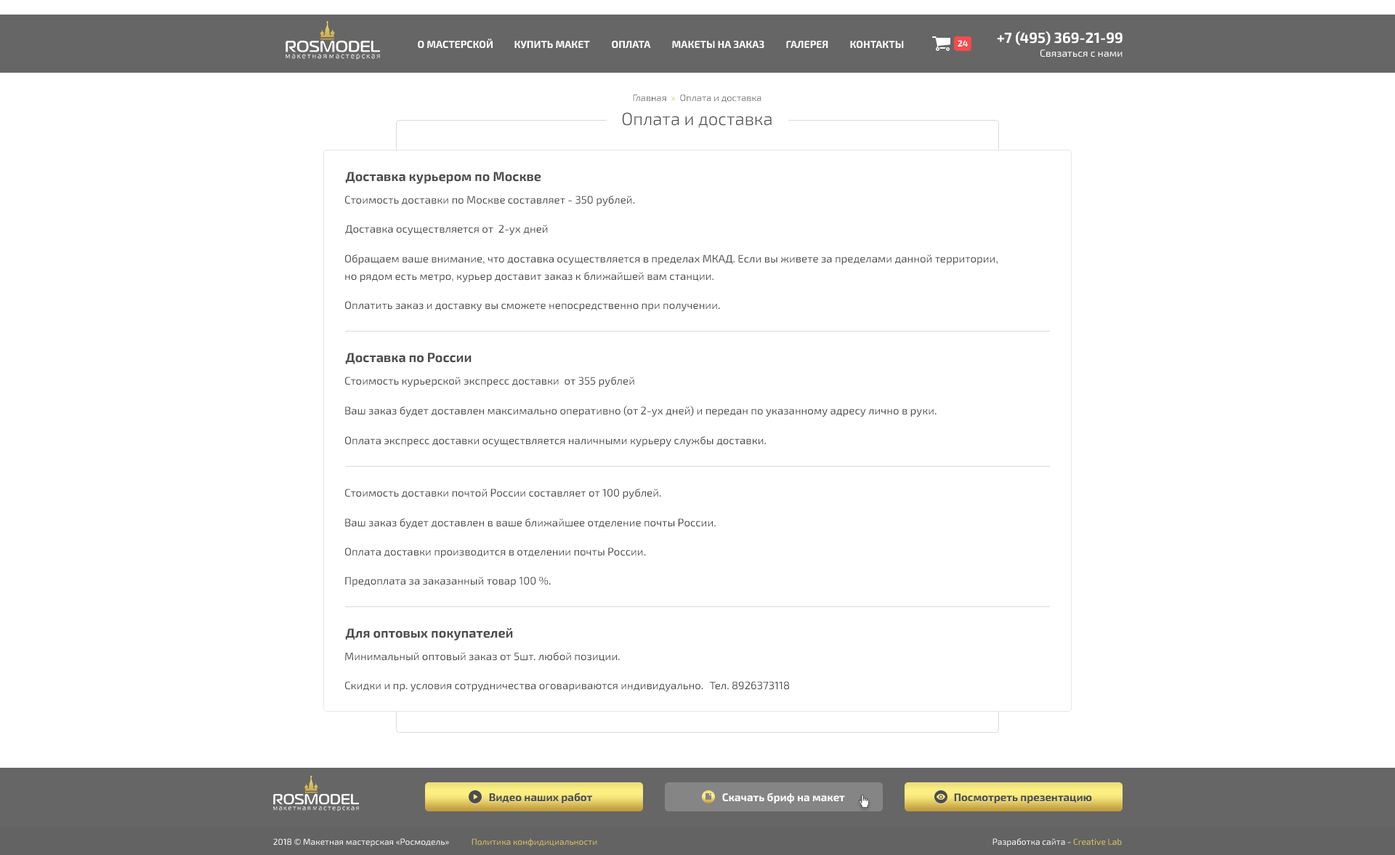
<style>
.page{position:relative;width:1395px;height:855px;background:#ffffff}
.page>*{position:absolute;margin:0}
.t1{font:9.4px "Exo2-Light";color:#4d4d4d}
.t2{font:9.4px "Exo2-Light";color:#d1b558}
.t3{font:17.4px "Exo2-Light";color:#4d4d4d}
.t4{font:13.1px "Exo2-Bold";color:#4d4d4d}
.t5{font:10.9px "Exo2-Regular";color:#4d4d4d}
.t6{font:10.9px/17.4px "Exo2-Regular";color:#4d4d4d}
</style>
<div class="page">
<p class="t1" style="left:633px;top:94px;width:129px;height:8px">Главная  <span class="t2">»</span>  Оплата и доставка</p>
<p class="t3" style="left:622px;top:113px;width:150px;height:15px">Оплата и доставка</p>
<p class="t4" style="left:345px;top:172px;width:196px;height:12px">Доставка курьером по Москве</p>
<p class="t5" style="left:345px;top:195px;width:290px;height:11px">Стоимость доставки по Москве составляет - 350 рублей.</p>
<p class="t5" style="left:345px;top:225px;width:203px;height:10px">Доставка осуществляется от  2-ух дней</p>
<p class="t6" style="left:345px;top:254px;width:653px;height:28px">Обращаем ваше внимание, что доставка осуществляется в пределах МКАД. Если вы живете за пределами данной территории, <br>но рядом есть метро, курьер доставит заказ к ближайшей вам станции.</p>
<p class="t5" style="left:345px;top:301px;width:375px;height:10px">Оплатить заказ и доставку вы сможете непосредственно при получении.</p>
<p class="t4" style="left:345px;top:352px;width:127px;height:12px">Доставка по России</p>
<p class="t5" style="left:345px;top:376px;width:289px;height:11px">Стоимость курьерской экспресс доставки  от 355 рублей</p>
<p class="t5" style="left:345px;top:406px;width:592px;height:10px">Ваш заказ будет доставлен максимально оперативно (от 2-ух дней) и передан по указанному адресу лично в руки.</p>
<p class="t5" style="left:345px;top:436px;width:421px;height:10px">Оплата экспресс доставки осуществляется наличными курьеру службы доставки.</p>
<p class="t5" style="left:345px;top:488px;width:316px;height:11px">Стоимость доставки почтой России составляет от 100 рублей.</p>
<p class="t5" style="left:345px;top:518px;width:371px;height:10px">Ваш заказ будет доставлен в ваше ближайшее отделение почты России.</p>
<p class="t5" style="left:345px;top:547px;width:301px;height:10px">Оплата доставки производится в отделении почты России.</p>
<p class="t5" style="left:345px;top:576px;width:206px;height:10px">Предоплата за заказанный товар 100 %.</p>
<p class="t4" style="left:345px;top:628px;width:168px;height:12px">Для оптовых покупателей</p>
<p class="t5" style="left:345px;top:652px;width:275px;height:10px">Минимальный оптовый заказ от 5шт. любой позиции.</p>
<p class="t5" style="left:345px;top:681px;width:358px;height:10px">Скидки и пр. условия сотрудничества оговариваются индивидуально.</p>
<p class="t5" style="left:709px;top:681px;width:80px;height:9px">Тел. 8926373118</p>
</div>
